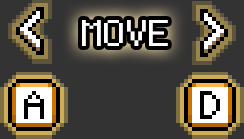
<style>
.page{position:relative;width:244px;height:139px;background:#333333}
.page>*{position:absolute;margin:0}
.t1{font:52px "Silver";color:#ffffff;scale:1.3 1}
</style>
<div class="page">
<p class="t1" style="left:82px;top:20px;width:86px;height:26px">MOVE</p>
</div>
